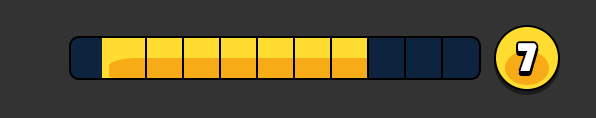
<style>
.page{position:relative;width:596px;height:118px;background:#333333}
.page>*{position:absolute;margin:0}
.t1{font:40px "LilitaOne";color:#ffffff;text-transform:uppercase}
</style>
<div class="page">
<p class="t1" style="left:518px;top:43px;width:19px;height:28px">7</p>
</div>
